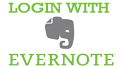
<style>
.page{position:relative;width:120px;height:66px;background:#ffffff}
.page>*{position:absolute;margin:0}
.t1{font:14px "Rockwell";color:#73bf39;scale:1.2 1}
</style>
<div class="page">
<p class="t1" style="left:8px;top:2px;width:101px;height:11px">LOGIN WITH</p>
</div>
